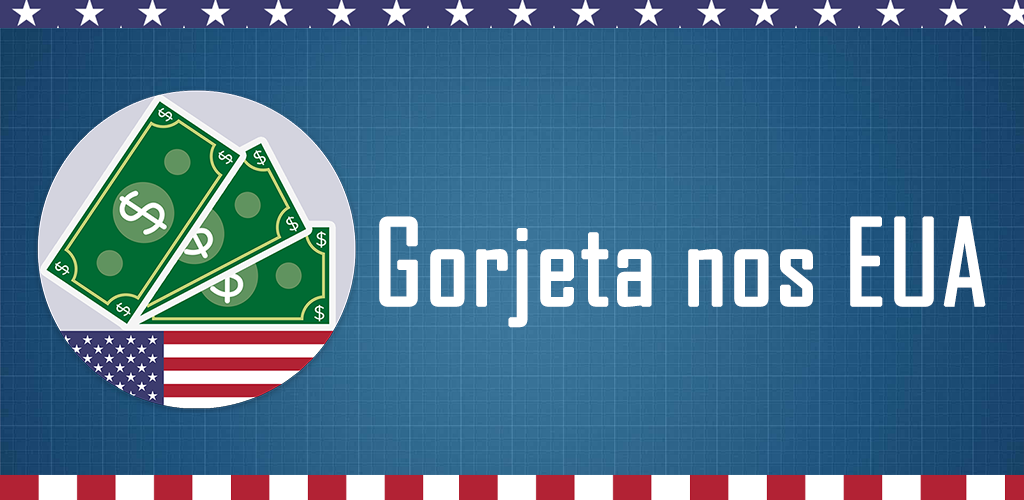
<style>
.page{position:relative;width:1024px;height:500px}
.page>*{position:absolute;margin:0}
.t1{font:113.5px "AgencyFB-Reg";color:#ffffff;font-weight:bold}
</style>
<div class="page">
<p class="t1" style="left:379px;top:216px;width:607px;height:112px">Gorjeta nos EUA</p>
</div>
